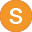
<style>
.page{position:relative;width:32px;height:32px;background:#f29627}
.page>*{position:absolute;margin:0}
.t1{font:30px "Roboto-Regular";letter-spacing:-0.042em;color:#ffffff}
</style>
<div class="page">
<p class="t1" style="left:9px;top:8px;width:14px;height:16px">s</p>
</div>
